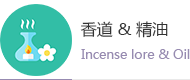
<style>
.page{position:relative;width:190px;height:80px;background:#ffffff}
.page>*{position:absolute;margin:0}
.t1{font:16px "MicrosoftYaHei";color:#333333}
.t2{font:12.7px "MicrosoftYaHei";color:#978bb1}
</style>
<div class="page">
<p class="t1" style="left:80px;top:21px;width:88px;height:17px">香道 &amp; 精油</p>
<p class="t2" style="left:81px;top:49px;width:109px;height:10px">Incense lore &amp; Oil</p>
</div>
